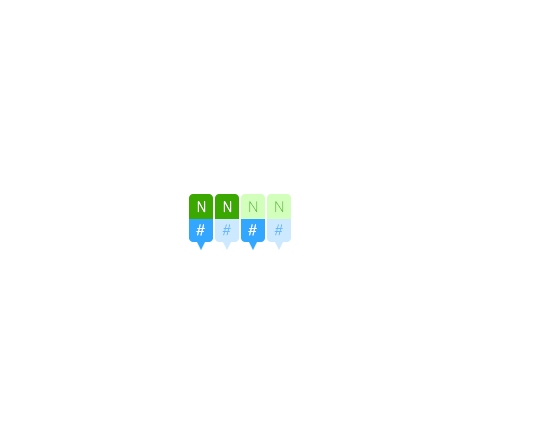
<style>
.page{position:relative;width:545px;height:436px;background:#ffffff}
.page>*{position:absolute;margin:0}
.t1{font:14px "YoonGothicPro735";letter-spacing:0.24em;color:#fffefe}
.t2{font:14px "YoonGothicPro715";letter-spacing:0.24em;color:#6cc04a}
.t3{font:14px "YoonGothicPro715";letter-spacing:0.24em;color:#66b9ff}
</style>
<div class="page">
<p class="t1" style="left:197px;top:201px;width:9px;height:12px">N</p>
<p class="t1" style="left:223px;top:201px;width:9px;height:12px">N</p>
<p class="t2" style="left:249px;top:201px;width:9px;height:12px">N</p>
<p class="t2" style="left:275px;top:201px;width:9px;height:12px">N</p>
<p class="t1" style="left:196px;top:224px;width:9px;height:12px">#</p>
<p class="t3" style="left:222px;top:224px;width:9px;height:12px">#</p>
<p class="t1" style="left:248px;top:224px;width:9px;height:12px">#</p>
<p class="t3" style="left:274px;top:224px;width:9px;height:12px">#</p>
</div>
